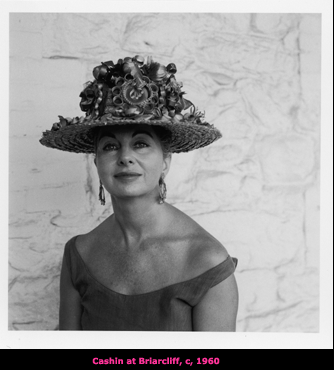
<style>
.page{position:relative;width:334px;height:370px}
.page>*{position:absolute;margin:0}
.t1{font:8.3px "Verdana-Bold";color:#ff3399}
</style>
<div class="page">
<p class="t1" style="left:92px;top:357px;width:128px;height:9px">Cashin at Briarcliff, c, 1960</p>
</div>
